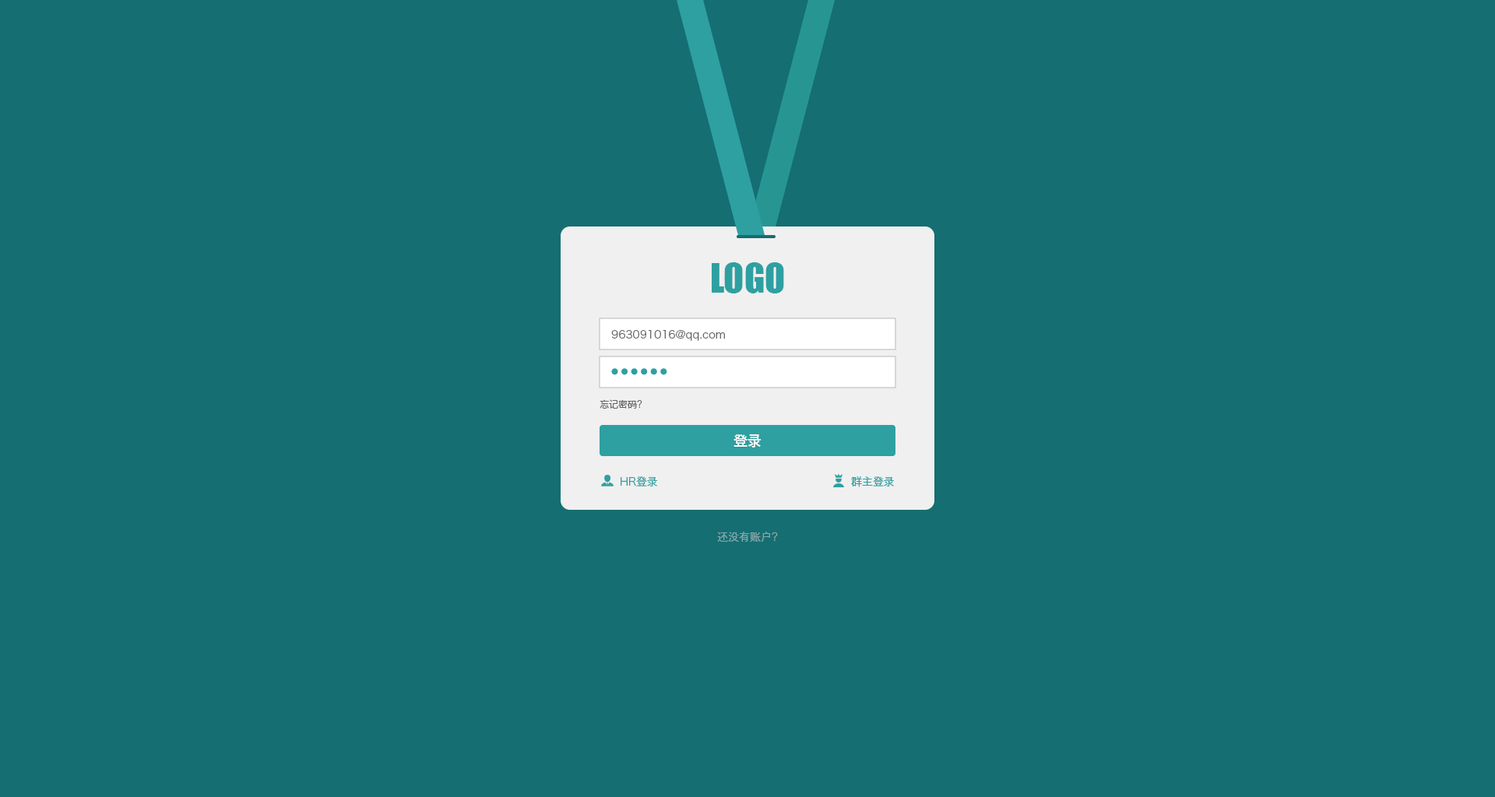
<style>
.page{position:relative;width:1495px;height:797px;background:#156e72}
.page>*{position:absolute;margin:0}
.t1{font:37.4px "Impact";color:#2ea0a1;text-transform:uppercase}
.t2{font:10.9px "HiraginoSansGB-W3";color:#666666}
.t3{font:9.3px "HiraginoSansGB-W3";color:#666666;text-transform:uppercase}
.t4{font:14px "HiraginoSansGB-W6";color:#ffffff;text-transform:uppercase}
.t5{font:10.9px "HiraginoSansGB-W3";color:#2ea0a1}
.t6{font:10.9px "HiraginoSansGB-W3";color:#86a9ab}
</style>
<div class="page">
<p class="t1" style="left:712px;top:262px;width:72px;height:32px">logo</p>
<p class="t2" style="left:611px;top:330px;width:114px;height:11px">963091016@qq.com</p>
<p class="t3" style="left:600px;top:400px;width:42px;height:9px">忘记密码?</p>
<p class="t4" style="left:734px;top:435px;width:27px;height:13px">登录</p>
<p class="t5" style="left:621px;top:477px;width:36px;height:10px">HR登录</p>
<p class="t5" style="left:851px;top:477px;width:43px;height:11px">群主登录</p>
<p class="t6" style="left:717px;top:532px;width:61px;height:10px">还没有账户?</p>
</div>
